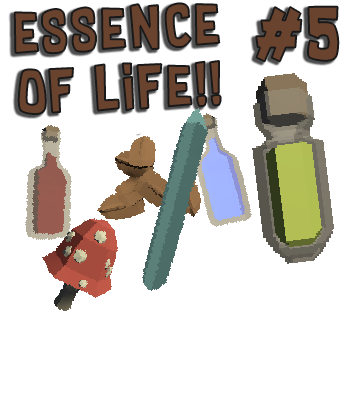
<style>
.page{position:relative;width:350px;height:400px;background:#ffffff}
.page>*{position:absolute;margin:0}
.t1{font:50.1px "SupersonicRocketship";letter-spacing:0.075em;color:#6a432f}
.t2{font:62.1px "SupersonicRocketship";letter-spacing:0.075em;color:#6a432f}
</style>
<div class="page">
<p class="t1" style="left:14px;top:3px;width:207px;height:111px;text-align:center;rotate:-3deg">essence <br>of life!!</p>
<p class="t2" style="left:256px;top:6px;width:83px;height:56px">#5</p>
</div>
